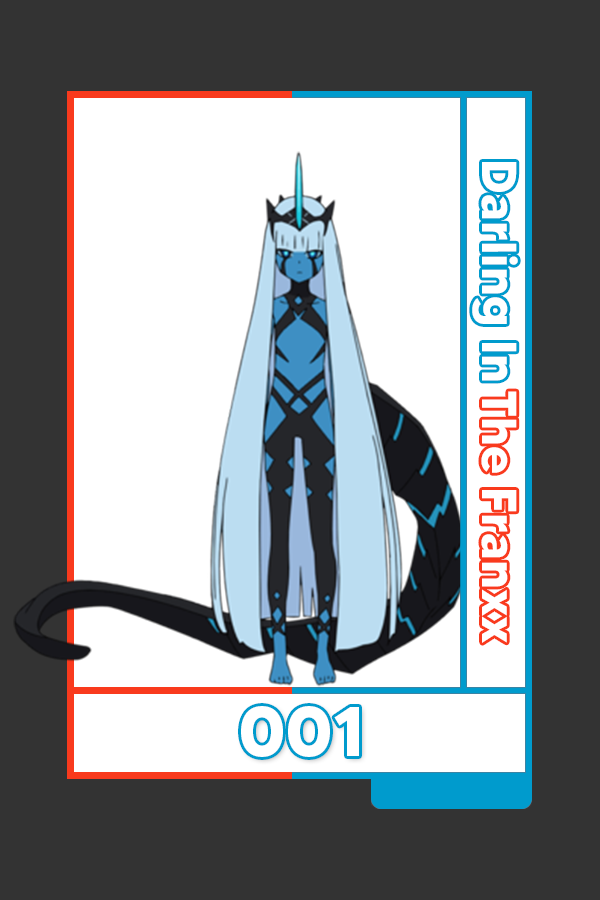
<style>
.page{position:relative;width:600px;height:900px;background:#333333}
.page>*{position:absolute;margin:0}
.t1{font:48.8px "MADETOMMY-Bold";color:#ffffff}
.t2{font:70.1px "MADETOMMY-Bold";color:#ffffff}
</style>
<div class="page">
<p class="t1" style="left:472px;top:162px;width:46px;height:219px;rotate:90deg">Darling In</p>
<p class="t1" style="left:481px;top:391px;width:36px;height:252px;rotate:90deg">The Franxx</p>
<p class="t2" style="left:241px;top:706px;width:118px;height:51px">001</p>
</div>
